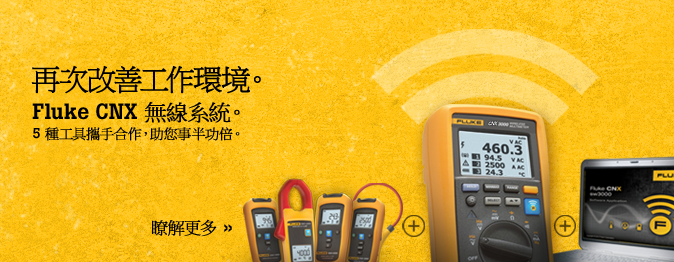
<style>
.page{position:relative;width:674px;height:262px}
.page>*{position:absolute;margin:0}
.t1{font:29px "MingLiU";letter-spacing:-0.005em;color:#000000;text-transform:uppercase;font-weight:bold}
.t2{font:14px/18.8px "MingLiU";color:#000000;font-weight:bold}
.t3{font:22px/18.8px "BotonPro-Medium";color:#000000}
.t4{font:22px/18.8px "MingLiU";color:#000000;font-weight:bold}
.t5{font:14px/18.8px "BotonPro-Medium";color:#000000}
.t6{font:17px "MingLiU";letter-spacing:-0.01em;color:#000000;font-weight:bold}
.t7{font:17px "HelveticaNeueLTStd-BdEx";letter-spacing:-0.01em;color:#000000}
</style>
<div class="page">
<p class="t1" style="left:31px;top:65px;width:230px;height:29px">再次改善工作環境。</p>
<p class="t2" style="left:32px;top:102px;width:208px;height:39px"><span class="t3">Fluke CNX </span><span class="t4">無線系統。<br></span><span class="t5">5 </span>種工具攜手合作，助您事半功倍。</p>
<p class="t6" style="left:152px;top:219px;width:80px;height:18px">瞭解更多<span class="t7"> »</span></p>
</div>
